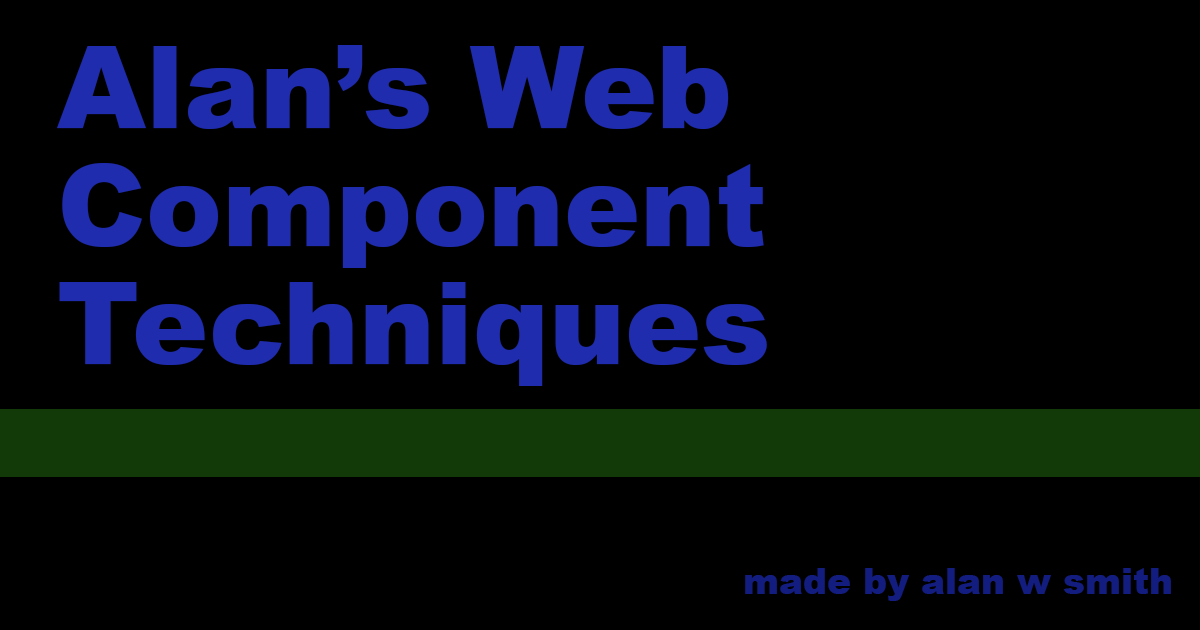
<style>
.page{position:relative;width:1200px;height:630px;background:#000000}
.page>*{position:absolute;margin:0}
.t1{font:114px/118px "Arial-Black";color:#1f2cad}
.t2{font:36px "Arial-Black";color:#131d80}
</style>
<div class="page">
<p class="t1" style="left:57px;top:45px;width:710px;height:341px">Alan’s Web <br>Component<br>Techniques</p>
<p class="t2" style="left:745px;top:568px;width:426px;height:33px">made by alan w smith</p>
</div>
